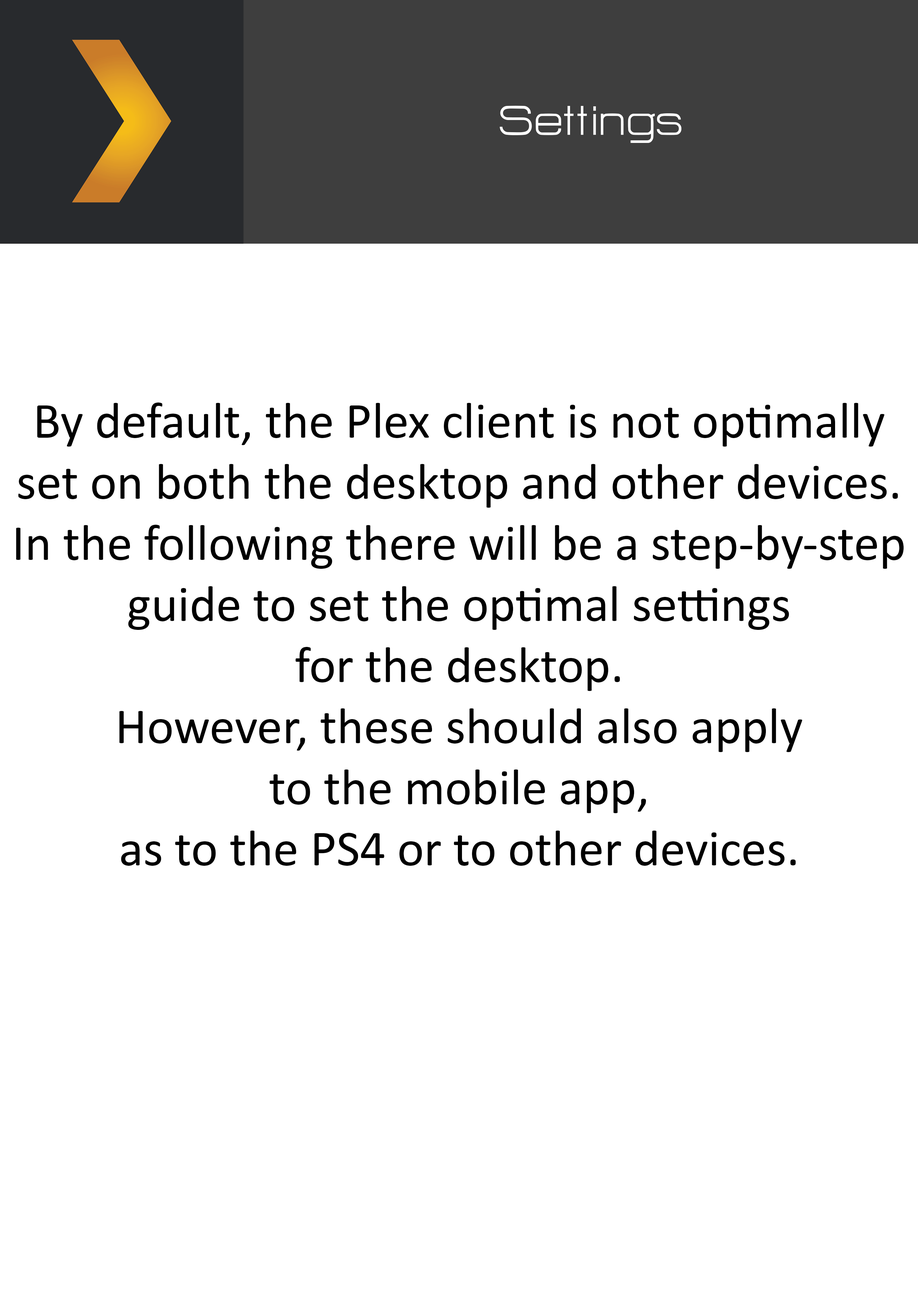
<style>
.page{position:relative;width:918px;height:1299px;background:#ffffff}
.page>*{position:absolute;margin:0}
.t1{font:50.9px "HURTMOLDPersonalUse-Regular";color:#ffffff}
.t2{font:50.9px "Calibri";color:#000000}
</style>
<div class="page">
<p class="t1" style="left:500px;top:106px;width:182px;height:37px">Settings</p>
<p class="t2" style="left:16px;top:402px;width:888px;height:464px;text-align:center">By default, the Plex client is not optimally<br>set on both the desktop and other devices.<br>In the following there will be a step-by-step<br>guide to set the optimal settings<br>for the desktop.<br>However, these should also apply<br>to the mobile app,<br>as to the PS4 or to other devices.</p>
</div>
